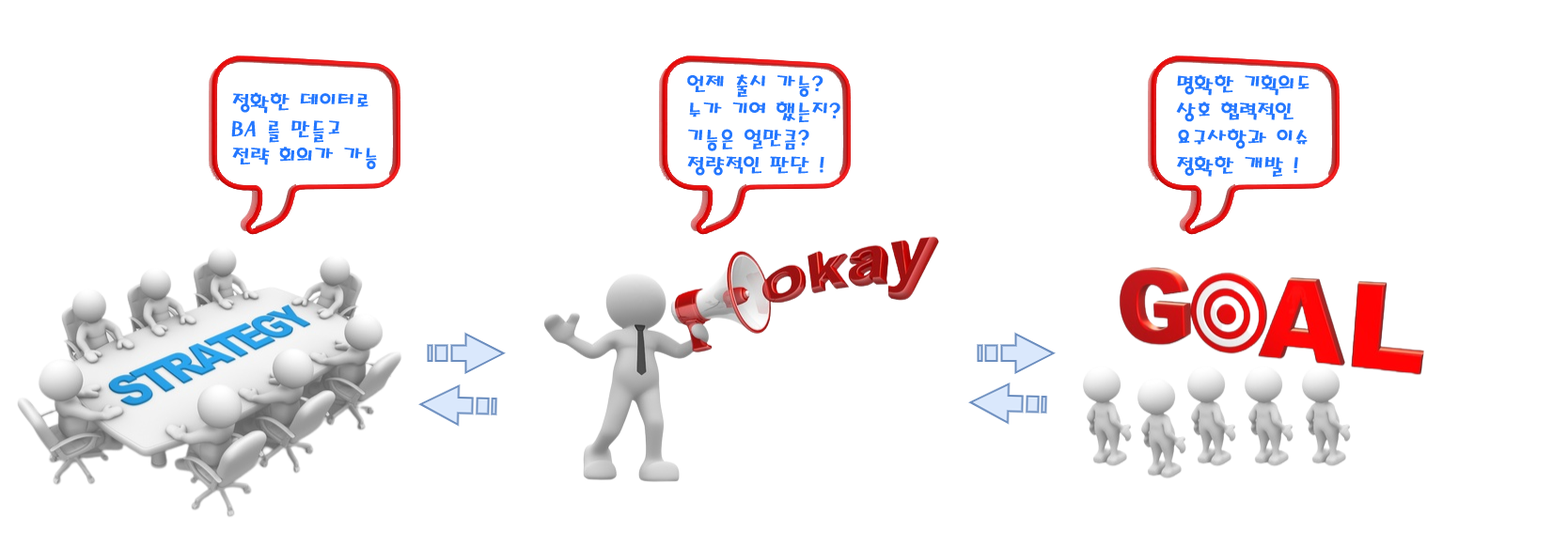
<style>
.page{position:relative;width:1568px;height:547px;background:#ffffff}
.page>*{position:absolute;margin:0}
.t1{font:22.6px "MagicR-HM";color:#2477ff}
</style>
<div class="page">
<p class="t1" style="left:687px;top:74px;width:153px;height:102px">언제 출시 가능?<br>누가 기여 했는지?<br>기능은 얼만큼?<br>정량적인 판단 !</p>
<p class="t1" style="left:1176px;top:74px;width:133px;height:103px">명확한 기획의도<br>상호 협력적인<br>요구사항과 이슈<br>정확한 개발 !</p>
<p class="t1" style="left:231px;top:92px;width:146px;height:77px">정확한 데이터로<br>BA 를 만들고<br>전략 회의가 가능</p>
</div>
